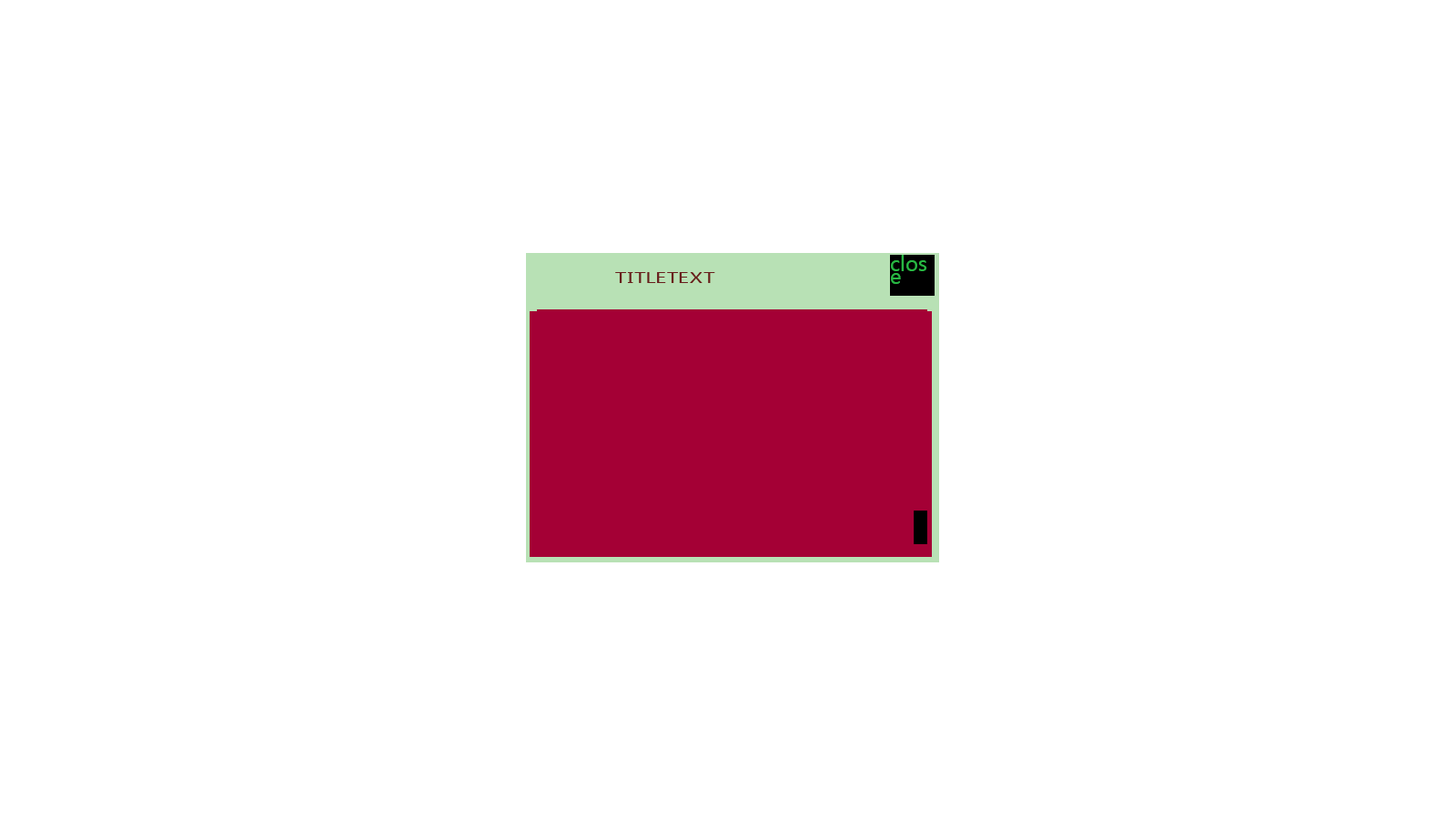
<style>
.page{position:relative;width:1456px;height:819px;background:#ffffff}
.page>*{position:absolute;margin:0}
.t1{font:20px "MicrosoftYaHei";color:#28b743}
.t2{font:14.3px "MicrosoftYaHei";letter-spacing:0.05em;color:#681d1d;text-transform:uppercase;scale:1.4 1}
</style>
<div class="page">
<p class="t1" style="left:891px;top:255px;width:36px;height:29px">close</p>
<p class="t2" style="left:615px;top:272px;width:100px;height:11px">titleText</p>
</div>
